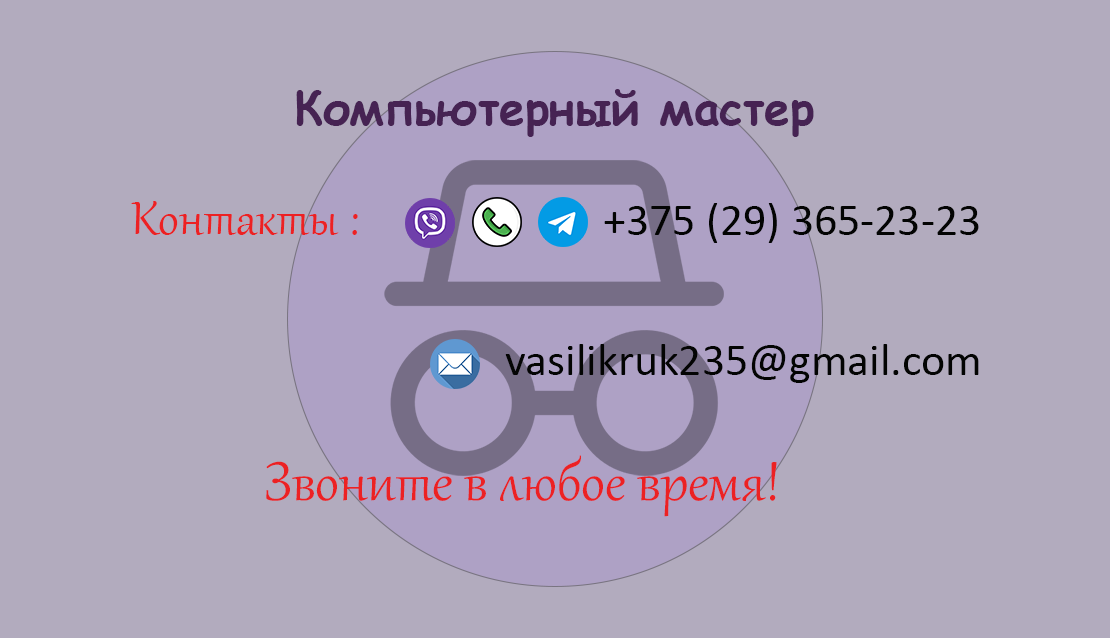
<style>
.page{position:relative;width:1110px;height:638px;background:#b2abbe}
.page>*{position:absolute;margin:0}
.t1{font:45.8px "ComicSansMS-Bold";color:#462353}
.t2{font:58.3px "Gabriola";color:#ec2123}
.t3{font:45.8px "Calibri";color:#030403}
.t4{font:66.7px "Gabriola";color:#ec2123}
</style>
<div class="page">
<p class="t1" style="left:296px;top:89px;width:518px;height:48px">Компьютерный мастер</p>
<p class="t2" style="left:131px;top:201px;width:227px;height:34px">Контакты :</p>
<p class="t3" style="left:604px;top:203px;width:375px;height:40px">+375 (29) 365-23-23</p>
<p class="t3" style="left:505px;top:344px;width:474px;height:39px">vasilikruk235@gmail.com</p>
<p class="t4" style="left:266px;top:455px;width:511px;height:62px">Звоните в любое время!</p>
</div>
